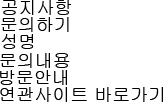
<style>
.page{position:relative;width:163px;height:102px;background:#ffffff}
.page>*{position:absolute;margin:0}
.t1{font:18px "Gulim";color:#000000}
</style>
<div class="page">
<p class="t1" style="left:2px;top:0px;width:70px;height:15px">공지사항</p>
<p class="t1" style="left:1px;top:17px;width:68px;height:15px">문의하기</p>
<p class="t1" style="left:1px;top:34px;width:33px;height:15px">성명</p>
<p class="t1" style="left:0px;top:53px;width:70px;height:15px">문의내용</p>
<p class="t1" style="left:0px;top:70px;width:67px;height:15px">방문안내</p>
<p class="t1" style="left:0px;top:87px;width:163px;height:15px">연관사이트 바로가기</p>
</div>
